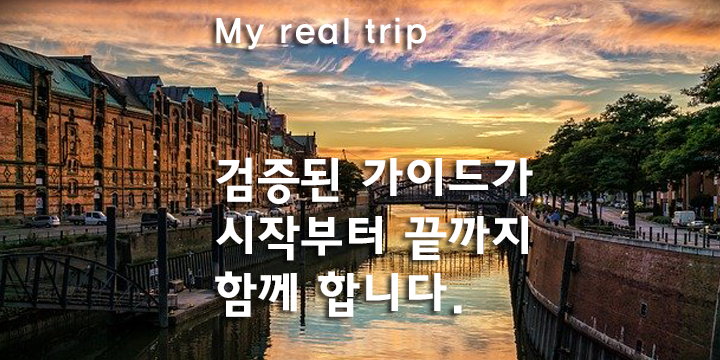
<style>
.page{position:relative;width:720px;height:360px}
.page>*{position:absolute;margin:0}
.t1{font:36px "HaanYGodic24";color:#ffffff}
.t2{font:48px "HaanYGodic25";color:#ffffff}
</style>
<div class="page">
<p class="t1" style="left:216px;top:17px;width:210px;height:33px">My real trip</p>
<p class="t2" style="left:215px;top:157px;width:318px;height:160px">검증된 가이드가 <br>시작부터 끝까지<br>함께 합니다.</p>
</div>
